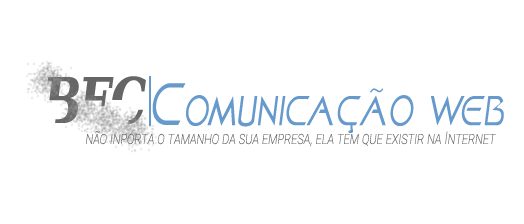
<style>
.page{position:relative;width:524px;height:224px;background:#ffffff}
.page>*{position:absolute;margin:0}
.t1{font:54.8px "KhanFill";color:#6699cc;font-variant:small-caps;font-style:italic;scale:0.72 1}
.t2{font:17.5px "Roboto-Thin";color:#666666;font-variant:small-caps;font-style:italic;scale:0.72 1}
</style>
<div class="page">
<p class="t1" style="left:152px;top:83px;width:352px;height:50px">Comunicação web</p>
<p class="t2" style="left:86px;top:131px;width:410px;height:16px">não inporta o tamanho da sua empresa, ela tem que existir na Internet</p>
</div>
